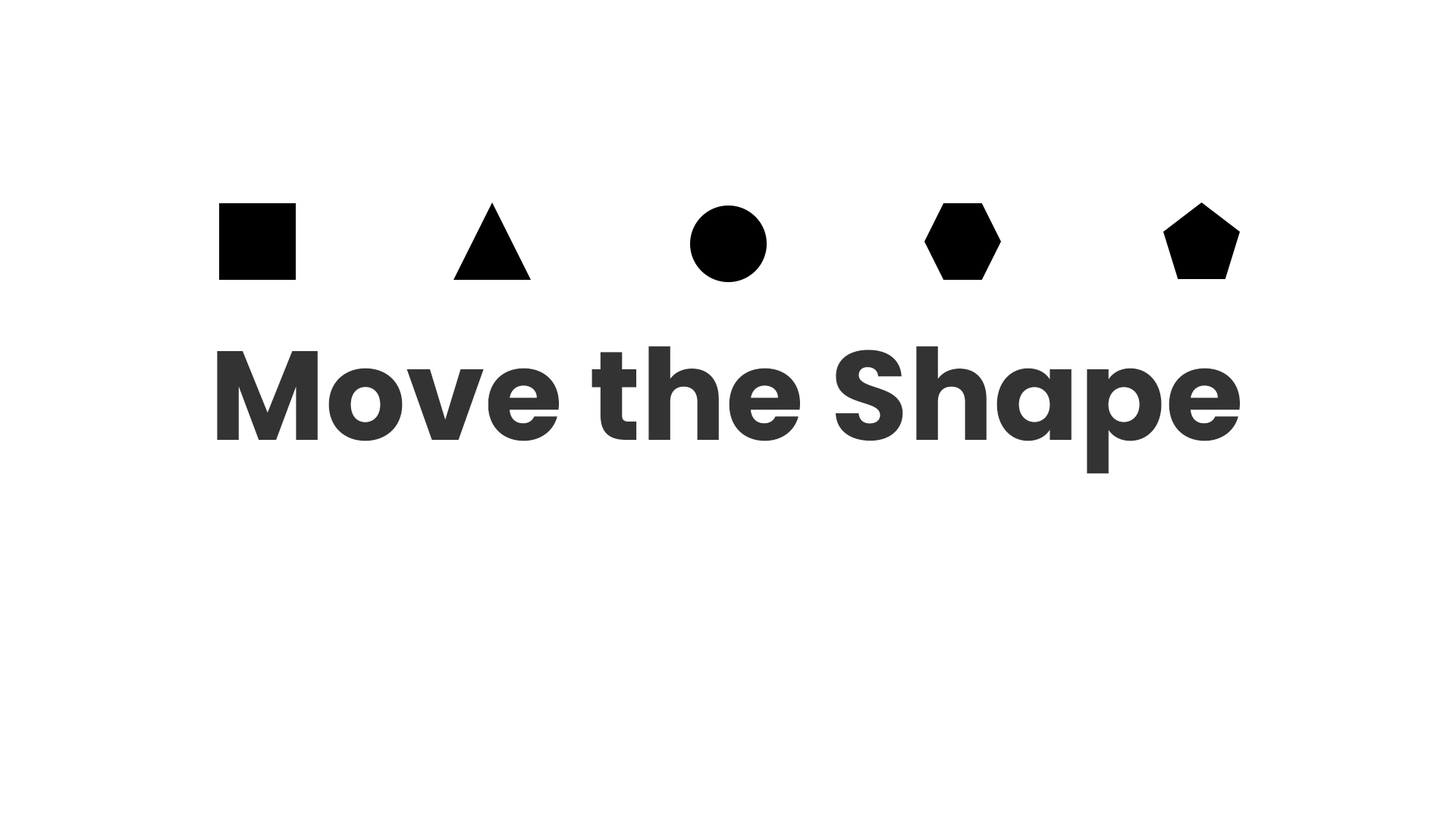
<style>
.page{position:relative;width:1456px;height:819px;background:#ffffff}
.page>*{position:absolute;margin:0}
.t1{font:126.4px "Poppins-Bold";color:#333333}
</style>
<div class="page">
<p class="t1" style="left:217px;top:346px;width:1024px;height:128px">Move the Shape</p>
</div>
